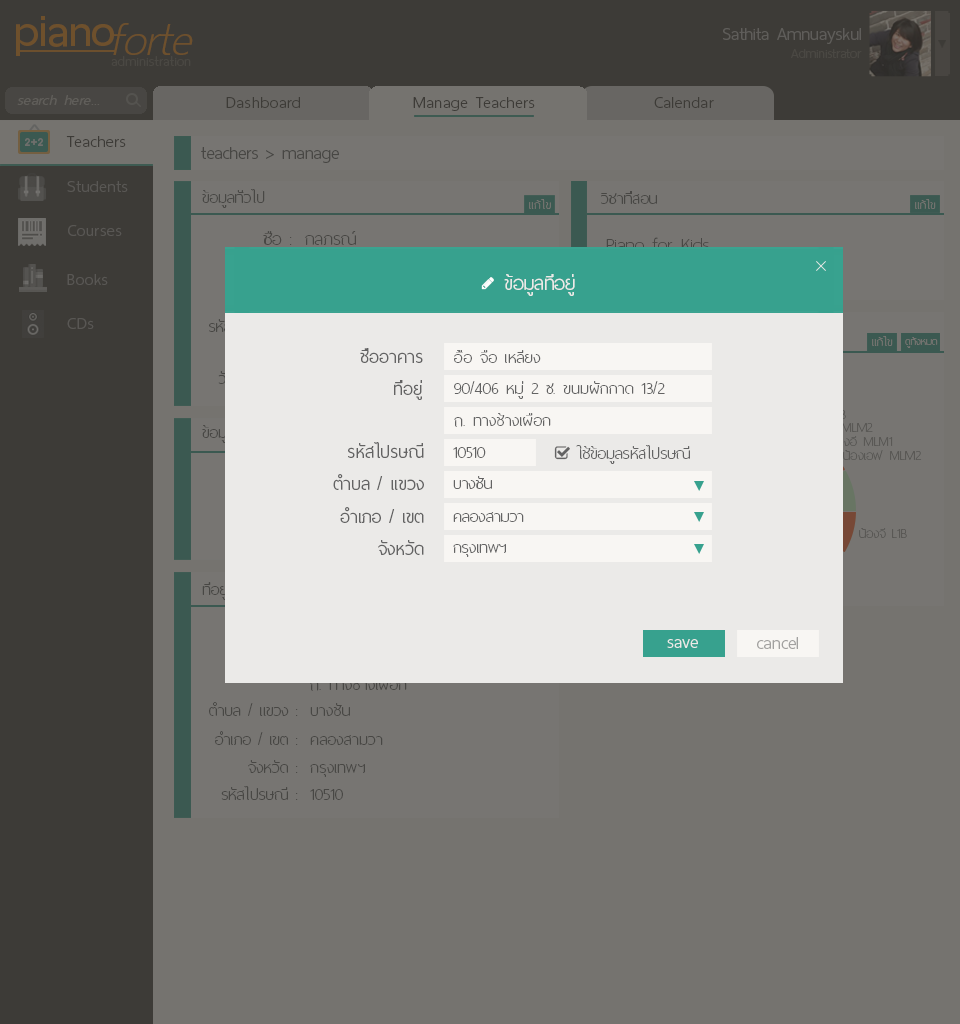
<style>
.page{position:relative;width:960px;height:1024px;background:#75736f}
.page>*{position:absolute;margin:0}
.t1{font:60px "ThaiSansNeue-SemiBold";letter-spacing:-0.005em;color:#6e502c}
.t2{font:62px "ThaiSansNeue-ExtraLightItalic";letter-spacing:-0.005em;color:#6e502c}
.t3{font:24px "ThaiSansNeue-Light";letter-spacing:-0.005em;color:#5f5d5a}
.t4{font:18px "ThaiSansNeue-Light";letter-spacing:-0.005em;color:#4a4843}
.t5{font:18.5px "ThaiSansNeue-ExtraLight";letter-spacing:0.025em;color:#4a4843}
.t6{font:20px "ThaiSansNeue-LightItalic";letter-spacing:0.025em;color:#605e5a}
.t7{font:22px "ThaiSansNeue-Light";letter-spacing:0.025em;color:#3d3b37}
.t8{font:24px "ThaiSansNeue-Light";letter-spacing:-0.005em;color:#484744}
.t9{font:22px "ThaiSansNeue-Light";letter-spacing:0.025em;color:#595754}
.t10{font:22px "ThaiSansNeue-UltraLight";color:#484744}
.t11{font:16px "ThaiSansNeue-UltraLight";letter-spacing:0.025em;color:#777572}
.t12{font:16px "ThaiSansNeue-UltraLight";color:#777572}
.t13{font:24px "ThaiSansNeue-UltraLight";color:#484744}
.t14{font:26px "ThaiSansNeue-UltraLight"}
.t15{font:26px "ThaiSansNeue-Light";letter-spacing:-0.005em;color:#ebeae8}
.t16{font:14px "ThaiSansNeue-UltraLight";color:#777572}
.t17{font:24px "ThaiSansNeue-Light";color:#636363}
.t18{font:22px "ThaiSansNeue-UltraLight";letter-spacing:0.01em;color:#636363}
.t19{font:22px "ThaiSansNeue-UltraLight";color:#636363}
.t20{font:18px "ThaiSansNeue-UltraLight";letter-spacing:0.01em;color:#5a5855}
.t21{font:18px "ThaiSansNeue-UltraLight";color:#5a5855}
.t22{font:24px "ThaiSansNeue-Light";letter-spacing:-0.005em;color:#ebeae8}
.t23{font:24px "ThaiSansNeue-Light";color:#a2a1a0}
.t24{font:22px "ThaiSansNeue-UltraLight";letter-spacing:0.01em;color:#484744}
</style>
<div class="page">
<p class="t1" style="left:16px;top:16px;width:98px;height:40px">piano</p>
<p class="t2" style="left:113px;top:23px;width:80px;height:32px">forte</p>
<p class="t3" style="left:723px;top:28px;width:138px;height:16px">Sathita Amnuayskul</p>
<p class="t4" style="left:791px;top:49px;width:71px;height:9px">Administrator</p>
<p class="t5" style="left:111px;top:56px;width:80px;height:10px">administration</p>
<p class="t6" style="left:17px;top:95px;width:83px;height:10px">search here...</p>
<p class="t7" style="left:226px;top:97px;width:74px;height:11px">Dashboard</p>
<p class="t7" style="left:413px;top:97px;width:122px;height:14px">Manage Teachers</p>
<p class="t7" style="left:654px;top:97px;width:60px;height:11px">Calendar</p>
<p class="t7" style="left:66px;top:136px;width:60px;height:11px">Teachers</p>
<p class="t8" style="left:201px;top:147px;width:138px;height:16px">teachers &gt; manage</p>
<p class="t9" style="left:67px;top:181px;width:61px;height:11px">Students</p>
<p class="t10" style="left:202px;top:189px;width:63px;height:19px">ข้อมูลทั่วไป</p>
<p class="t10" style="left:601px;top:191px;width:56px;height:13px">วิชาที่สอน</p>
<p class="t11" style="left:529px;top:199px;width:22px;height:10px">แก้ไข</p>
<p class="t12" style="left:915px;top:199px;width:21px;height:10px">แก้ไข</p>
<p class="t9" style="left:68px;top:225px;width:54px;height:11px">Courses</p>
<p class="t13" style="left:263px;top:231px;width:29px;height:14px">ชื่อ :</p>
<p class="t13" style="left:305px;top:231px;width:51px;height:19px">กุลภรณ์</p>
<p class="t14" style="left:606px;top:237px;width:103px;height:14px">Piano for Kids</p>
<p class="t9" style="left:67px;top:274px;width:41px;height:11px">Books</p>
<p class="t15" style="left:504px;top:274px;width:71px;height:22px">ข้อมูลที่อยู่</p>
<p class="t9" style="left:67px;top:318px;width:27px;height:11px">CDs</p>
<p class="t12" style="left:872px;top:336px;width:21px;height:10px">แก้ไข</p>
<p class="t16" style="left:905px;top:337px;width:33px;height:11px">ดูทั้งหมด</p>
<p class="t17" style="left:360px;top:348px;width:63px;height:15px">ชื่ออาคาร</p>
<p class="t18" style="left:454px;top:350px;width:87px;height:13px">อื้อ จือ เหลียง</p>
<p class="t17" style="left:394px;top:380px;width:28px;height:20px">ที่อยู่</p>
<p class="t18" style="left:454px;top:381px;width:211px;height:18px">90/406 หมู่ 2 ซ. ขนมผักกาด 13/2</p>
<p class="t18" style="left:454px;top:413px;width:97px;height:14px">ถ. ทางช้างเผือก</p>
<p class="t17" style="left:348px;top:442px;width:76px;height:16px">รหัสไปรษณี</p>
<p class="t19" style="left:453px;top:447px;width:33px;height:11px">10510</p>
<p class="t19" style="left:576px;top:445px;width:114px;height:19px">ใช้ข้อมูลรหัสไปรษณี</p>
<p class="t20" style="left:843px;top:450px;width:79px;height:10px">น้องเอฟ MLM2</p>
<p class="t17" style="left:333px;top:474px;width:91px;height:16px">ตำบล / แขวง</p>
<p class="t19" style="left:453px;top:476px;width:39px;height:13px">บางชัน</p>
<p class="t17" style="left:340px;top:507px;width:84px;height:16px">อำเภอ / เขต</p>
<p class="t19" style="left:453px;top:512px;width:71px;height:10px">คลองสามวา</p>
<p class="t21" style="left:859px;top:528px;width:48px;height:10px">น้องจี L1B</p>
<p class="t17" style="left:378px;top:540px;width:46px;height:15px">จังหวัด</p>
<p class="t19" style="left:453px;top:544px;width:53px;height:13px">กรุงเทพฯ</p>
<p class="t22" style="left:667px;top:639px;width:31px;height:9px">save</p>
<p class="t23" style="left:757px;top:637px;width:41px;height:12px">cancel</p>
<p class="t10" style="left:209px;top:702px;width:89px;height:14px">ตำบล / แขวง :</p>
<p class="t24" style="left:310px;top:703px;width:40px;height:13px">บางชัน</p>
<p class="t10" style="left:215px;top:731px;width:83px;height:14px">อำเภอ / เขต :</p>
<p class="t24" style="left:310px;top:735px;width:73px;height:10px">คลองสามวา</p>
<p class="t10" style="left:248px;top:760px;width:50px;height:13px">จังหวัด :</p>
<p class="t24" style="left:310px;top:764px;width:55px;height:13px">กรุงเทพฯ</p>
<p class="t10" style="left:221px;top:786px;width:77px;height:14px">รหัสไปรษณี :</p>
<p class="t24" style="left:310px;top:789px;width:33px;height:11px">10510</p>
</div>
